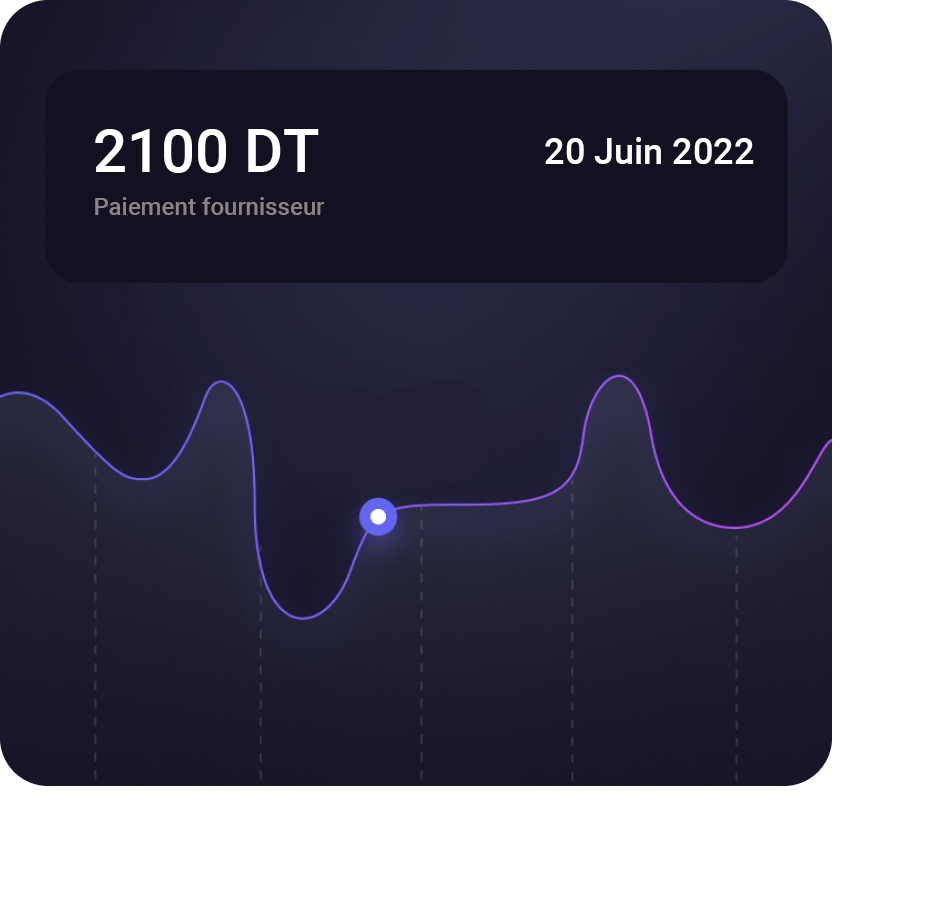
<style>
.page{position:relative;width:938px;height:902px;background:#ffffff}
.page>*{position:absolute;margin:0}
.t1{font:60px "Roboto-Medium";color:#ffffff}
.t2{font:36px "Roboto-Medium";color:#ffffff}
.t3{font:24px "Roboto-Medium";color:#8c8484}
</style>
<div class="page">
<p class="t1" style="left:95px;top:129px;width:224px;height:44px">2100 DT</p>
<p class="t2" style="left:545px;top:137px;width:209px;height:27px">20 Juin 2022</p>
<p class="t3" style="left:95px;top:197px;width:230px;height:18px">Paiement fournisseur</p>
</div>
